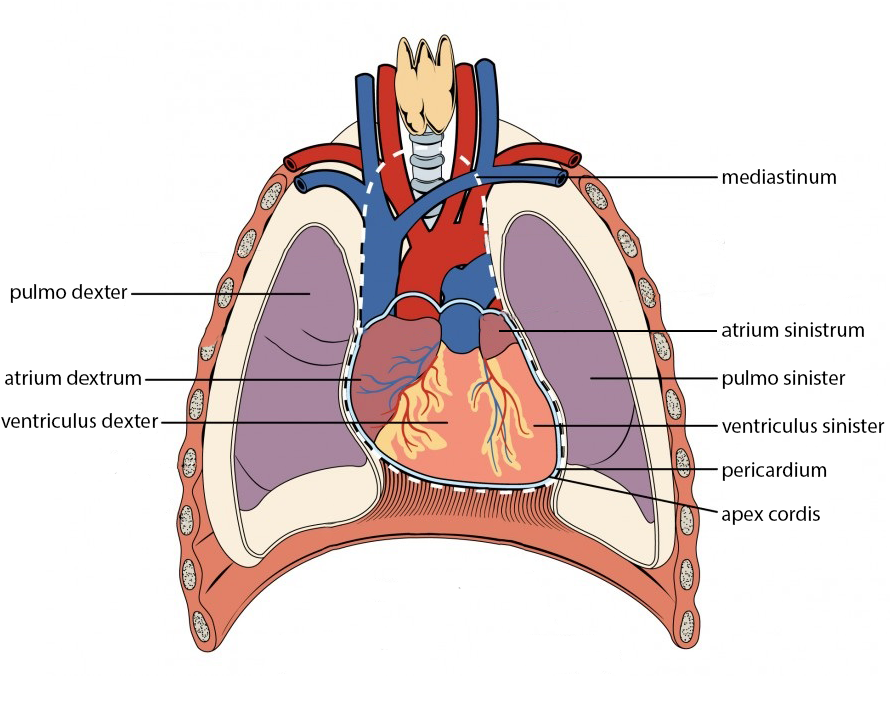
<style>
.page{position:relative;width:890px;height:702px;background:#ffffff}
.page>*{position:absolute;margin:0}
.t1{font:21px "MyriadPro-Regular";color:#000000}
</style>
<div class="page">
<p class="t1" style="left:722px;top:169px;width:114px;height:15px">mediastinum</p>
<p class="t1" style="left:10px;top:284px;width:118px;height:19px">pulmo dexter</p>
<p class="t1" style="left:722px;top:322px;width:142px;height:15px">atrium sinistrum</p>
<p class="t1" style="left:5px;top:370px;width:136px;height:15px">atrium dextrum</p>
<p class="t1" style="left:722px;top:370px;width:124px;height:19px">pulmo sinister</p>
<p class="t1" style="left:1px;top:413px;width:158px;height:15px">ventriculus dexter</p>
<p class="t1" style="left:722px;top:418px;width:163px;height:15px">ventriculus sinister</p>
<p class="t1" style="left:722px;top:462px;width:105px;height:19px">pericardium</p>
<p class="t1" style="left:722px;top:506px;width:98px;height:19px">apex cordis</p>
</div>
